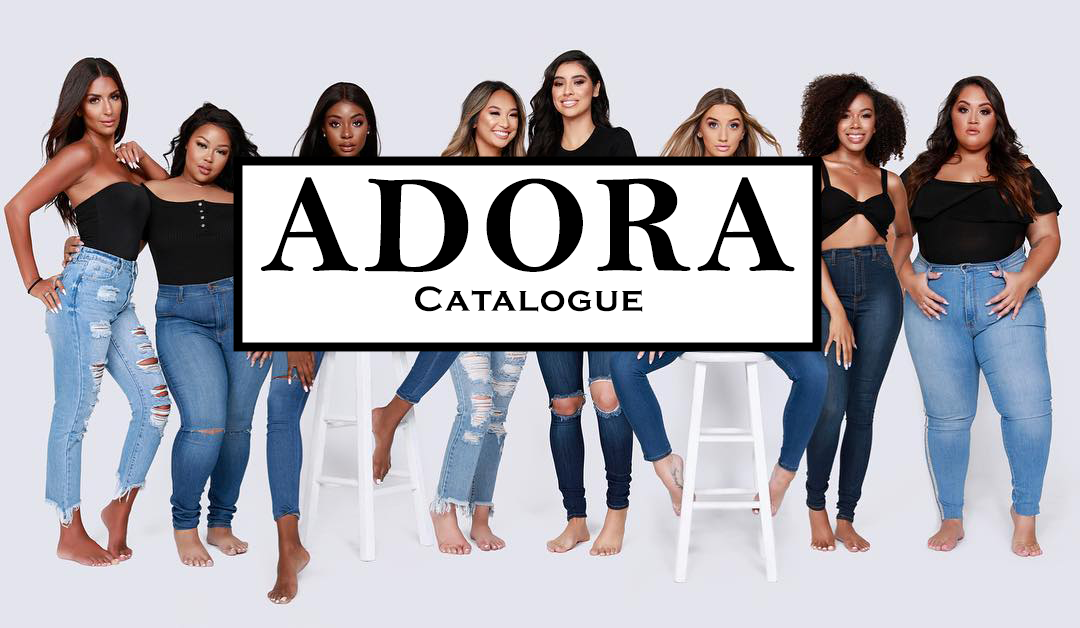
<style>
.page{position:relative;width:1080px;height:628px;background:#e4e4ee}
.page>*{position:absolute;margin:0}
.t1{font:140px "BellMTBold";letter-spacing:0.04em;color:#000000}
.t2{font:36px "CopperplateGothic-Bold";letter-spacing:0.04em;color:#000000}
</style>
<div class="page">
<p class="t1" style="left:261px;top:177px;width:534px;height:95px">ADORA</p>
<p class="t2" style="left:415px;top:286px;width:228px;height:26px">Catalogue</p>
</div>
